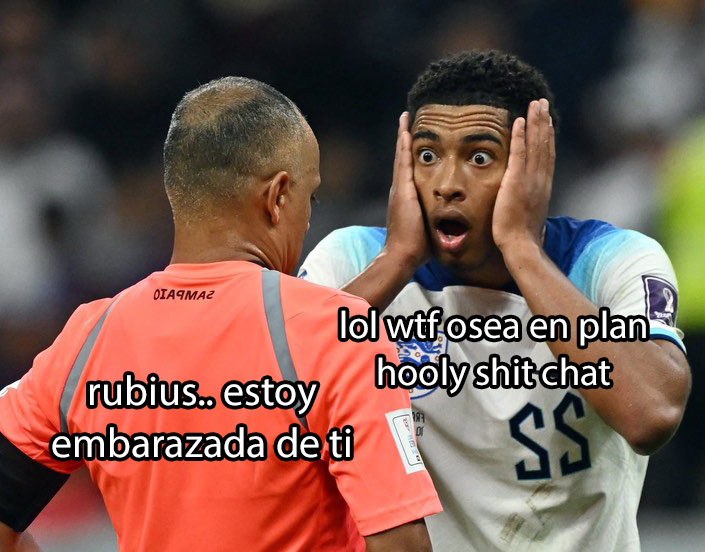
<style>
.page{position:relative;width:705px;height:552px}
.page>*{position:absolute;margin:0}
.t1{font:38.5px "MyriadPro-Regular";color:#ffffff}
.t2{font:41.9px "MyriadPro-Regular";color:#ffffff}
</style>
<div class="page">
<p class="t1" style="left:341px;top:310px;width:305px;height:84px;text-align:center">lol wtf osea en plan<br>hooly shit chat</p>
<p class="t2" style="left:52px;top:375px;width:299px;height:83px;text-align:center">rubius.. estoy<br>embarazada de ti</p>
</div>
